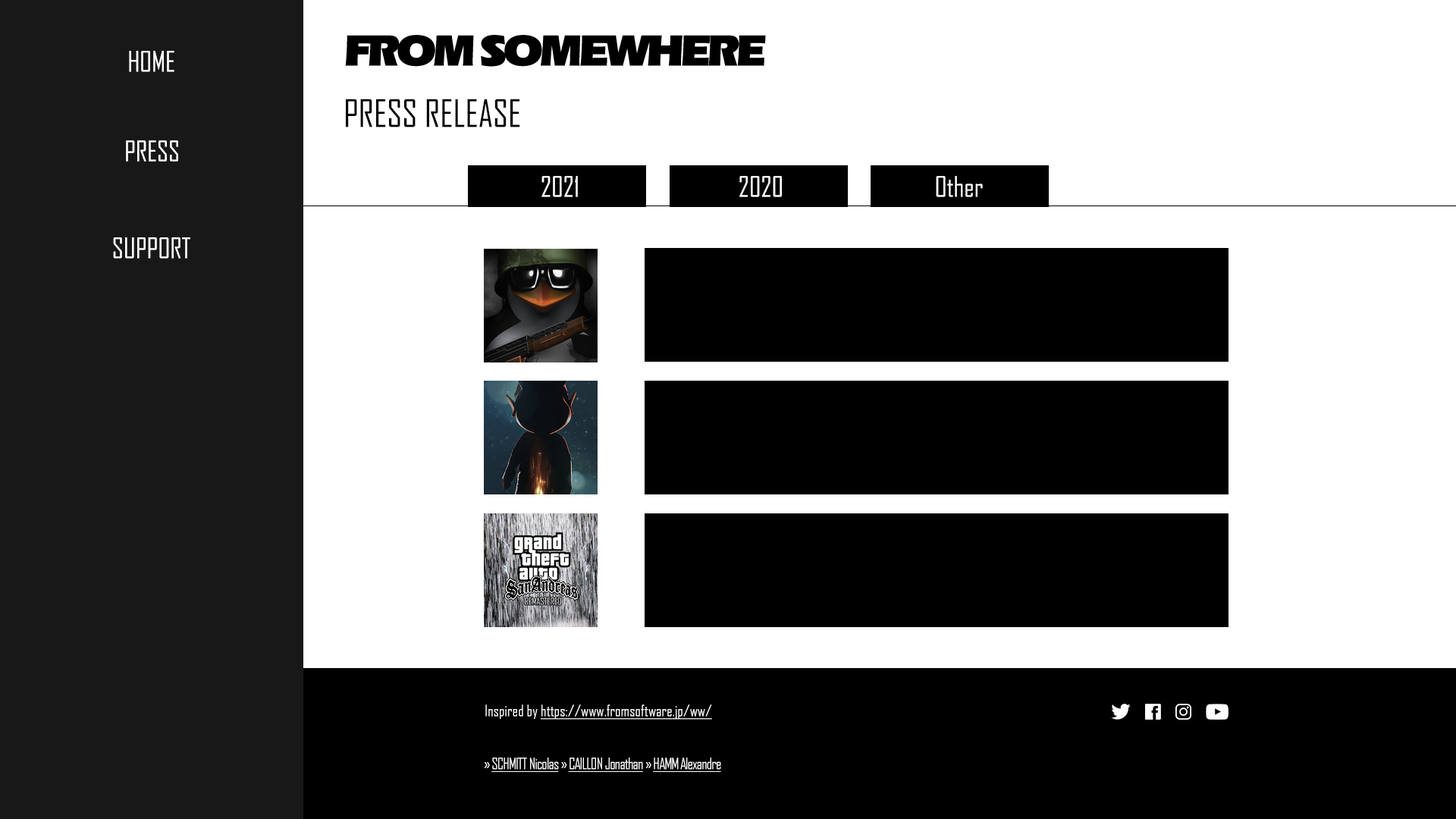
<style>
.page{position:relative;width:1456px;height:819px;background:#ffffff}
.page>*{position:absolute;margin:0}
.t1{font:45.5px "ErasITCbyBT-Ultra";letter-spacing:-0.075em;color:#000000}
.t2{font:27.3px "AgencyFB-Reg";color:#ffffff}
.t3{font:36.4px "AgencyFB-Reg";color:#000000}
.t4{font:15.2px "AgencyFB-Reg";color:#ffffff;text-decoration:underline}
.t5{font:15.2px "AgencyFB-Reg";color:#ffffff}
.t6{font:15.2px "AgencyFB-Reg";letter-spacing:-0.05em;color:#ffffff;text-decoration:underline}
.t7{font:15.2px "AgencyFB-Reg";letter-spacing:-0.05em;color:#ffffff}
</style>
<div class="page">
<p class="t1" style="left:345px;top:35px;width:129px;height:32px">FROM</p>
<p class="t1" style="left:481px;top:35px;width:285px;height:32px">SOMEWHERE</p>
<p class="t2" style="left:129px;top:51px;width:45px;height:21px">HOME</p>
<p class="t3" style="left:346px;top:99px;width:174px;height:28px">PRESS RELEASE</p>
<p class="t2" style="left:126px;top:140px;width:52px;height:22px">PRESS</p>
<p class="t2" style="left:541px;top:176px;width:37px;height:21px">2021</p>
<p class="t2" style="left:739px;top:176px;width:43px;height:21px">2020</p>
<p class="t2" style="left:936px;top:176px;width:47px;height:21px">Other</p>
<p class="t2" style="left:113px;top:237px;width:77px;height:22px">SUPPORT</p>
<p class="t4" style="left:485px;top:704px;width:227px;height:16px"><span class="t5">Inspired by </span>https://www.fromsoftware.jp/ww/</p>
<p class="t6" style="left:484px;top:758px;width:237px;height:14px"><span class="t7">» </span>SCHMITT Nicolas<span class="t7"> » </span>CAILLON Jonathan<span class="t7"> » </span>HAMM Alexandre</p>
</div>
